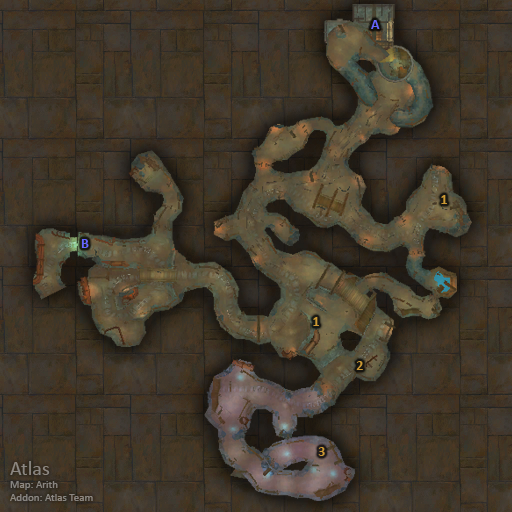
<style>
.page{position:relative;width:512px;height:512px}
.page>*{position:absolute;margin:0}
.t1{font:14px "Calibri-Bold";color:#6666ff}
.t2{font:14px "Calibri-Bold";color:#cc9933}
.t3{font:11px "Calibri";color:#8c8681}
.t4{font:20px "Calibri";color:#8c8681}
</style>
<div class="page">
<p class="t1" style="left:371px;top:20px;width:9px;height:9px">A</p>
<p class="t2" style="left:441px;top:195px;width:6px;height:9px">1</p>
<p class="t1" style="left:81px;top:239px;width:8px;height:9px">B</p>
<p class="t2" style="left:313px;top:317px;width:6px;height:9px">1</p>
<p class="t2" style="left:356px;top:361px;width:7px;height:9px">2</p>
<p class="t2" style="left:318px;top:447px;width:7px;height:9px">3</p>
<p class="t3" style="left:10px;top:461px;width:83px;height:40px"><span class="t4">Atlas<br></span>Map: Arith<br>Addon: Atlas Team</p>
</div>
